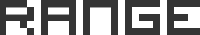
<style>
.page{position:relative;width:200px;height:35px;background:#343434}
.page>*{position:absolute;margin:0}
.t1{font:69.5px "VisitorTT1BRK";color:#343434}
</style>
<div class="page">
<p class="t1" style="left:0px;top:0px;width:202px;height:35px">Range</p>
</div>
